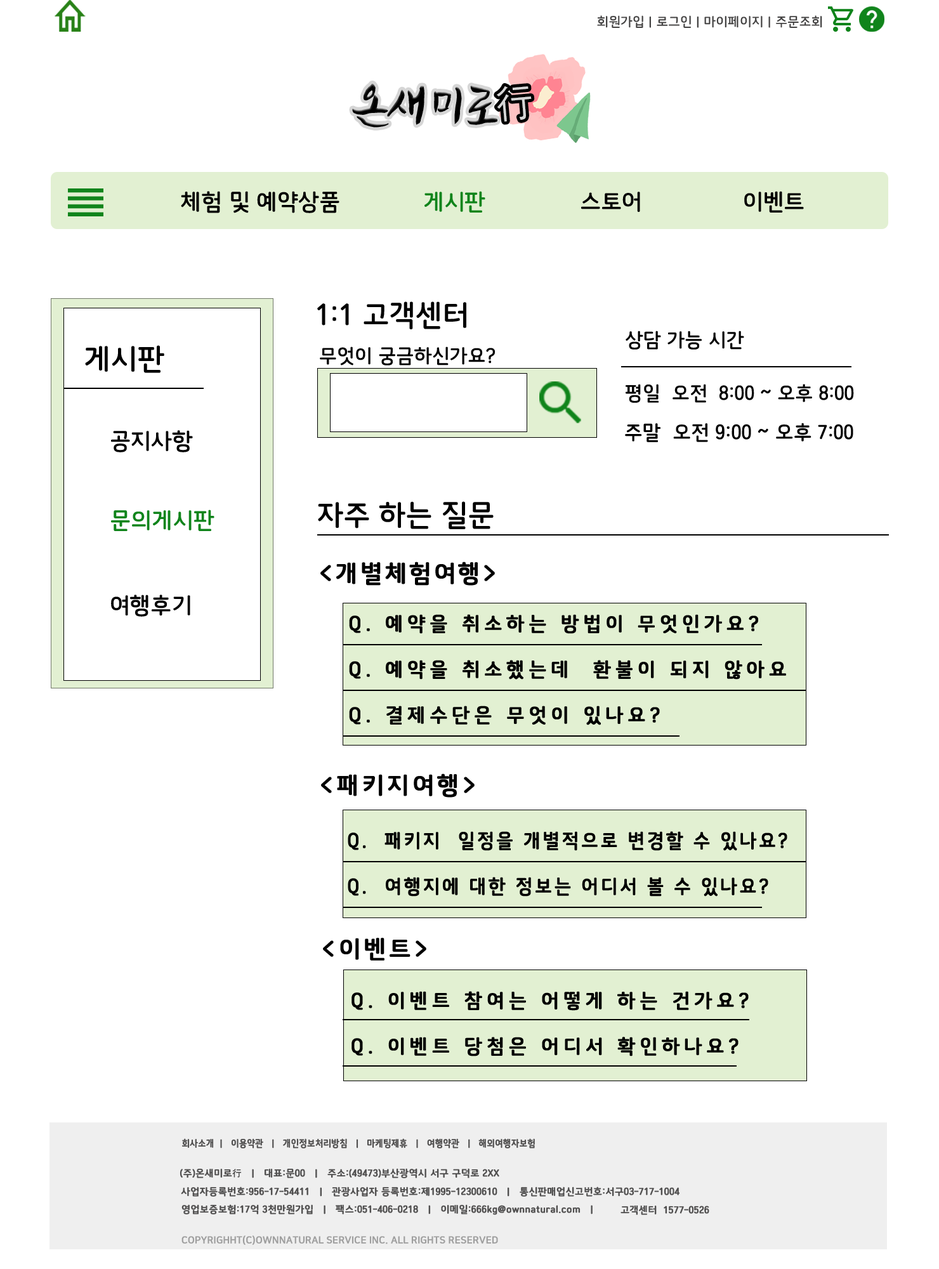
<style>
.page{position:relative;width:939px;height:1269px;background:#ffffff}
.page>*{position:absolute;margin:0}
.t1{font:12.7px "SuncheonB";color:#444343}
.t2{font:57.1px "JSArirangPPURI-Regular";color:#000000;scale:0.94 1}
.t3{font:42.5px "Gulim";color:#d6d6d6;scale:0.94 1}
.t4{font:22.2px "SuncheonB";color:#000000}
.t5{font:22.2px "SuncheonB";color:#10841b}
.t6{font:28.6px "SuncheonB";color:#000000}
.t7{font:19px "SuncheonB";color:#000000}
.t8{font:19.5px "SuncheonB";color:#000000}
.t9{font:23.5px "SuncheonB";letter-spacing:0.075em;color:#000000;font-weight:bold}
.t10{font:19px "SuncheonB";letter-spacing:0.2em;color:#000000;font-weight:bold}
.t11{font:23.5px "SuncheonB";letter-spacing:0.1em;color:#000000;font-weight:bold}
.t12{font:19px "SuncheonB";letter-spacing:0.1em;color:#000000;font-weight:bold;scale:0.95 1}
.t13{font:9.5px "SuncheonB";color:#504f4f;font-weight:bold;scale:0.88 1}
.t14{font:9.5px "SuncheonB";color:#504f4f;font-weight:bold}
.t15{font:9.5px "GulimChe";color:#504f4f;font-weight:bold}
.t16{font:9.5px "NanumSquareB";color:#9e9e9e;font-weight:bold}
</style>
<div class="page">
<p class="t1" style="left:597px;top:15px;width:226px;height:13px">회원가입 | 로그인 | 마이페이지 | 주문조회</p>
<p class="t2" style="left:352px;top:84px;width:146px;height:44px">온새미로</p>
<p class="t3" style="left:497px;top:86px;width:35px;height:36px;rotate:-5deg">行</p>
<p class="t4" style="left:181px;top:191px;width:159px;height:22px">체험 및 예약상품</p>
<p class="t5" style="left:425px;top:191px;width:61px;height:22px">게시판</p>
<p class="t4" style="left:581px;top:192px;width:59px;height:20px">스토어</p>
<p class="t4" style="left:745px;top:191px;width:59px;height:22px">이벤트</p>
<p class="t6" style="left:317px;top:301px;width:150px;height:28px">1:1 고객센터</p>
<p class="t7" style="left:626px;top:331px;width:119px;height:19px">상담 가능 시간</p>
<p class="t6" style="left:85px;top:345px;width:79px;height:28px">게시판</p>
<p class="t7" style="left:320px;top:347px;width:175px;height:19px">무엇이 궁금하신가요?</p>
<p class="t7" style="left:626px;top:384px;width:228px;height:19px">평일  오전  8:00 ~ 오후 8:00</p>
<p class="t8" style="left:625px;top:423px;width:229px;height:19px">주말  오전 9:00 ~ 오후 7:00</p>
<p class="t4" style="left:111px;top:430px;width:82px;height:23px">공지사항</p>
<p class="t5" style="left:111px;top:510px;width:104px;height:21px">문의게시판</p>
<p class="t6" style="left:318px;top:501px;width:176px;height:28px">자주 하는 질문</p>
<p class="t9" style="left:321px;top:562px;width:174px;height:24px">&lt;개별체험여행&gt;</p>
<p class="t4" style="left:111px;top:595px;width:79px;height:22px">여행후기</p>
<p class="t10" style="left:349px;top:614px;width:437px;height:111px">Q. 예약을 취소하는 방법이 무엇인가요?<br><br>Q. 예약을 취소했는데  환불이 되지 않아요<br><br>Q. 결제수단은 무엇이 있나요?</p>
<p class="t11" style="left:321px;top:774px;width:154px;height:24px">&lt;패키지여행&gt;</p>
<p class="t12" style="left:348px;top:831px;width:440px;height:66px">Q.  패키지  일정을 개별적으로 변경할 수 있나요?<br><br>Q.  여행지에 대한 정보는 어디서 볼 수 있나요?</p>
<p class="t11" style="left:323px;top:938px;width:104px;height:23px">&lt;이벤트&gt;</p>
<p class="t10" style="left:352px;top:991px;width:397px;height:66px">Q. 이벤트 참여는 어떻게 하는 건가요?<br><br>Q. 이벤트 당첨은 어디서 확인하나요?</p>
<p class="t13" style="left:182px;top:1139px;width:353px;height:10px">회사소개  |   이용약관   |   개인정보처리방침   |   마케팅제휴   |   여행약관   |   해외여행자보험</p>
<p class="t14" style="left:180px;top:1168px;width:320px;height:11px">(주)온새미로<span class="t15">行</span>   |   대표:문00   |   주소:(49473)부산광역시 서구 구덕로 2XX</p>
<p class="t14" style="left:181px;top:1187px;width:499px;height:10px">사업자등록번호:956-17-54411   |   관광사업자 등록번호:제1995-12300610   |   통신판매업신고번호:서구03-717-1004</p>
<p class="t14" style="left:182px;top:1205px;width:411px;height:10px">영업보증보험:17억 3천만원가입   |   팩스:051-406-0218   |   이메일:666kg@ownnatural.com   |</p>
<p class="t14" style="left:621px;top:1205px;width:89px;height:10px">고객센터  1577-0526</p>
<p class="t16" style="left:182px;top:1236px;width:316px;height:9px">COPYRIGHHT(C)OWNNATURAL SERVICE INC. ALL RIGHTS RESERVED</p>
</div>
